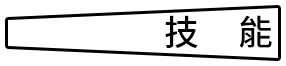
<style>
.page{position:relative;width:286px;height:66px;background:#ffffff}
.page>*{position:absolute;margin:0}
.t1{font:35px "NotoSansCJKtc-Medium";letter-spacing:0.06em;color:#000000}
</style>
<div class="page">
<p class="t1" style="left:165px;top:15px;width:107px;height:34px">技　能</p>
</div>
